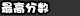
<style>
.page{position:relative;width:80px;height:16px;background:#333333}
.page>*{position:absolute;margin:0}
.t1{font:12px "DFPHaiBaoW12";color:#ffffff}
</style>
<div class="page">
<p class="t1" style="left:1px;top:2px;width:48px;height:12px">最高分数</p>
</div>
